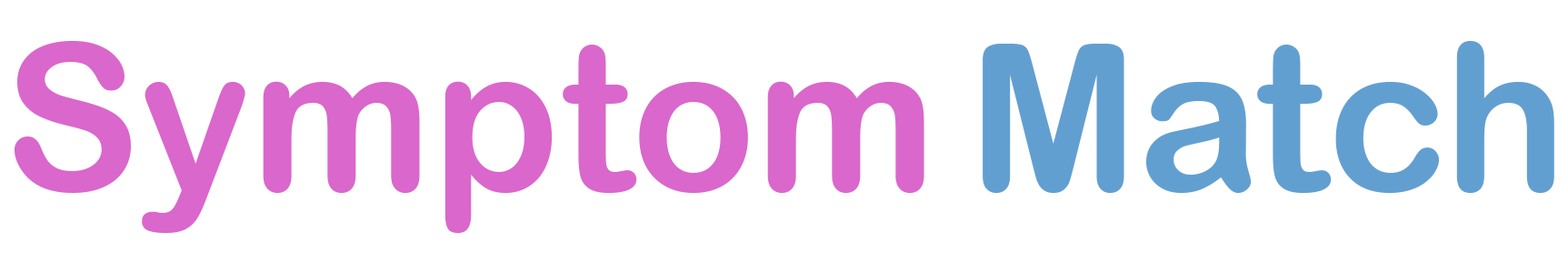
<style>
.page{position:relative;width:1568px;height:273px;background:#ffffff}
.page>*{position:absolute;margin:0}
.t1{font:204.5px "ArialRoundedMTBold";color:#da67cb}
.t2{font:204.5px "ArialRoundedMTBold";color:#629fd1}
</style>
<div class="page">
<p class="t1" style="left:14px;top:41px;width:910px;height:192px">Symptom</p>
<p class="t2" style="left:983px;top:41px;width:571px;height:152px">Match</p>
</div>
